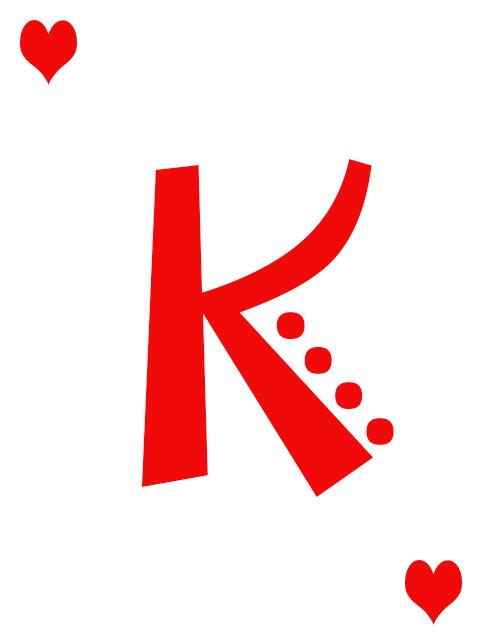
<style>
.page{position:relative;width:480px;height:640px;background:#ffffff}
.page>*{position:absolute;margin:0}
.t1{font:386.3px "Jokerman-Regular";color:#f10a0a}
</style>
<div class="page">
<p class="t1" style="left:141px;top:159px;width:253px;height:338px">K</p>
</div>
